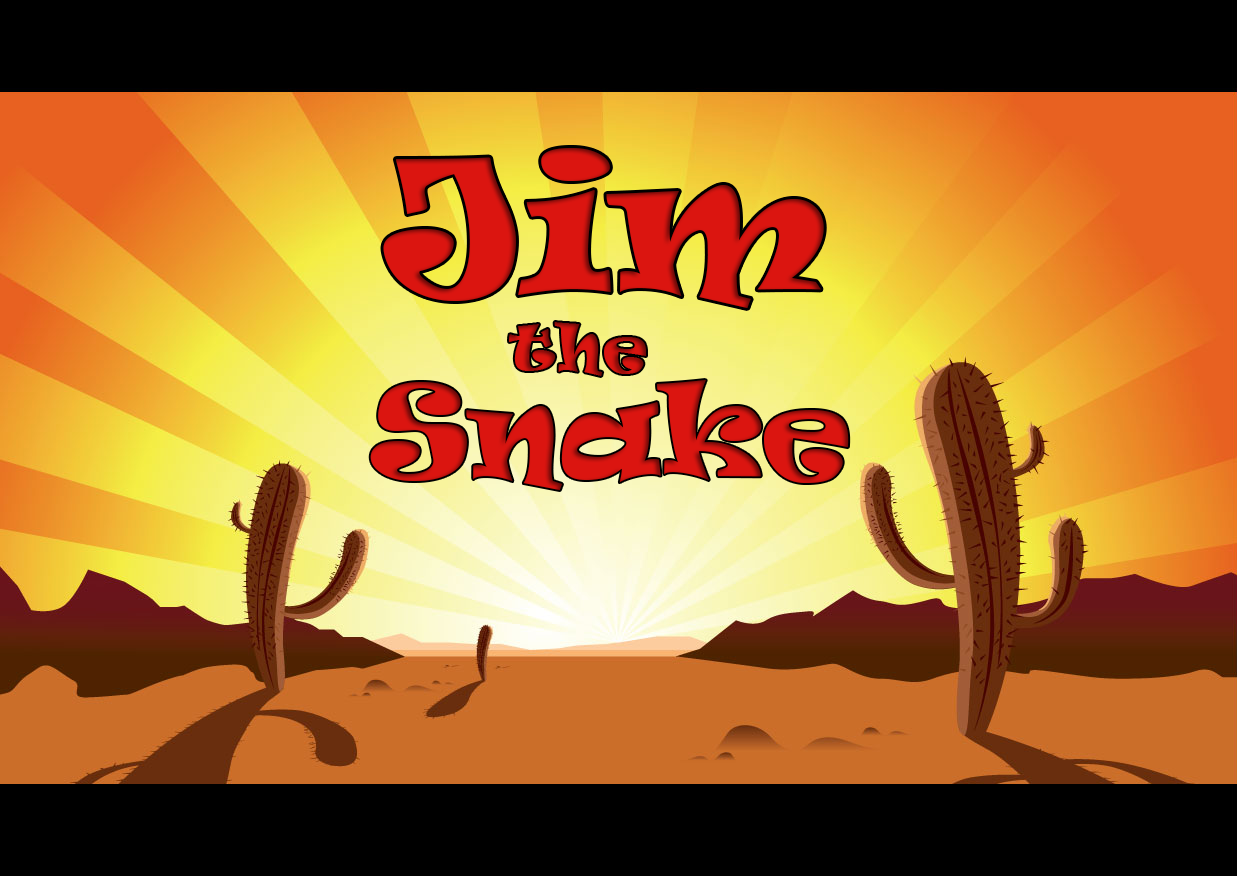
<style>
.page{position:relative;width:1237px;height:876px;background:#000000}
.page>*{position:absolute;margin:0}
.t1{font:180px "Ravie";color:#db1510}
.t2{font:60px "Ravie"}
.t3{font:120px "Ravie";color:#da1510}
</style>
<div class="page">
<p class="t1" style="left:383px;top:148px;width:441px;height:160px">Jim</p>
<p class="t2" style="left:509px;top:322px;width:137px;height:54px">the</p>
<p class="t3" style="left:370px;top:380px;width:479px;height:110px">Snake</p>
</div>
